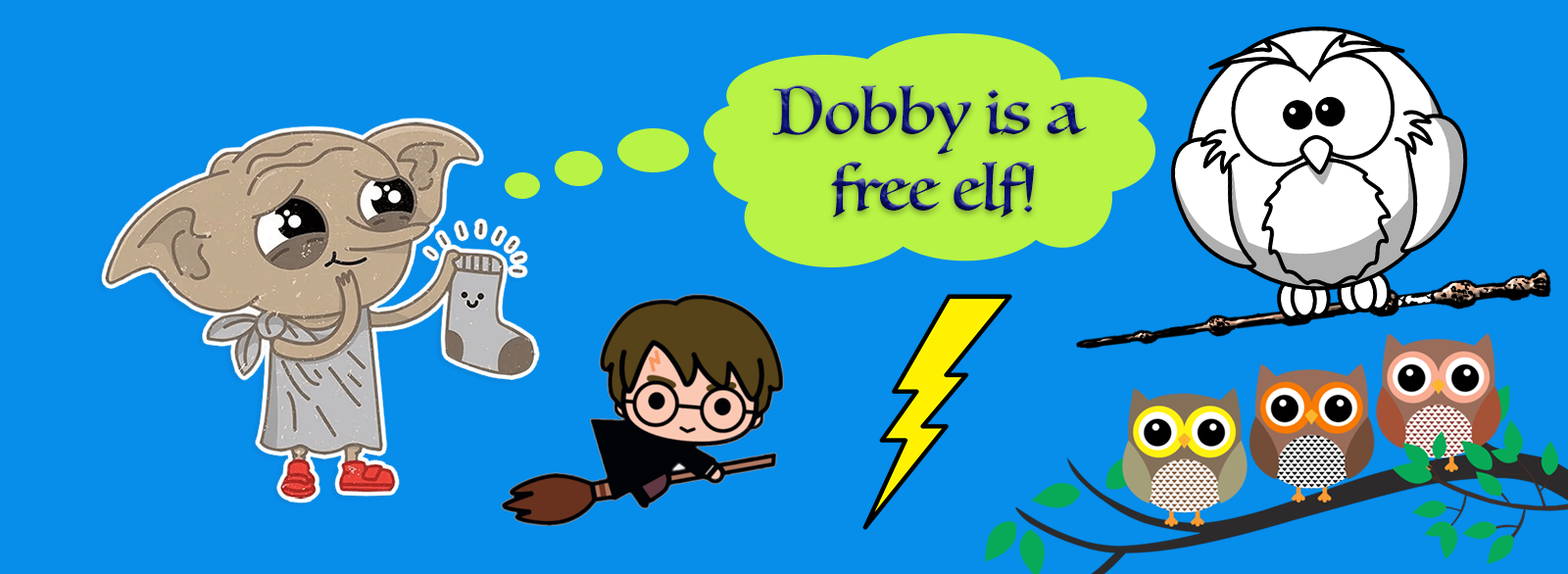
<style>
.page{position:relative;width:1568px;height:574px;background:#078dea}
.page>*{position:absolute;margin:0}
.t1{font:63.7px "Luminari-Regular"}
</style>
<div class="page">
<p class="t1" style="left:772px;top:85px;width:315px;height:133px;text-align:center">Dobby is a <br>free elf!</p>
</div>
